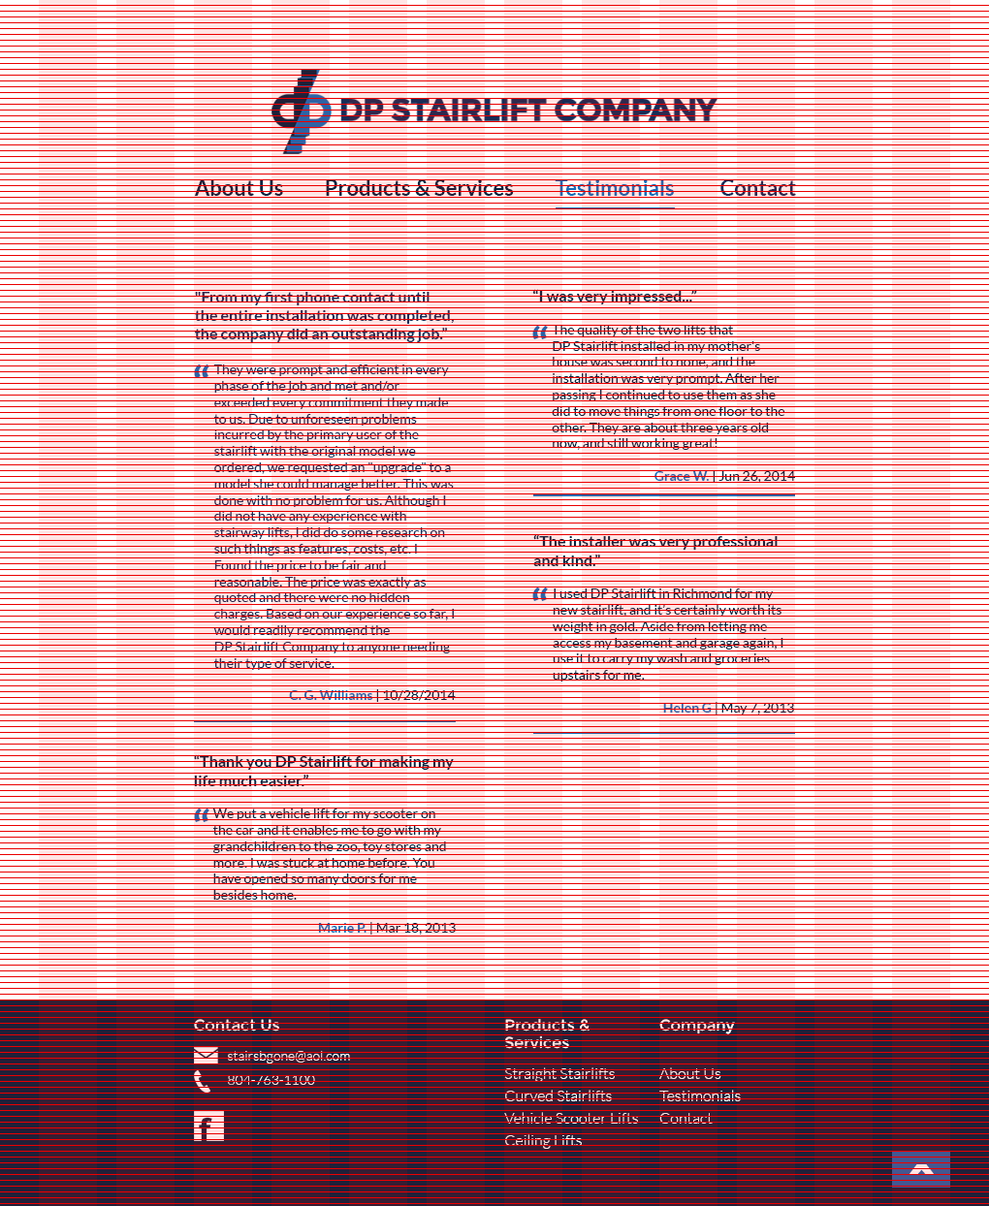
<style>
.page{position:relative;width:989px;height:1206px}
.page>*{position:absolute;margin:0}
.t1{font:21.3px "Lato-Bold";color:#07243f}
.t2{font:21.3px "Lato-Bold";color:#092540}
.t3{font:21.3px "Lato-Bold";color:#176db6}
.t4{font:21.3px "Lato-Bold";color:#192c56}
.t5{font:13.6px "Lato-Regular";color:#192c56}
.t6{font:15.5px "Lato-Bold";color:#192c56}
.t7{font:13.6px "Lato-Bold";color:#176db6}
.t8{font:13.6px "Lato-Regular";color:#07243f}
.t9{font:13.6px "Lato-Regular"}
.t10{font:15.5px "Lato-Bold"}
.t11{font:13.6px "Lato-Bold"}
.t12{font:47.5px "Lato-Bold";color:#176db6}
.t13{font:15.5px "Montserrat-Regular"}
.t14{font:15.5px/22.3px "Lato-Light"}
.t15{font:15.5px/19.4px "Montserrat-Regular"}
.t16{font:15.5px/17.4px "Montserrat-Regular"}
.t17{font:15.5px/15.5px "Lato-Light"}
.t18{font:15.5px/15.5px "Montserrat-Regular"}
.t19{font:15.5px/33px "Lato-Light"}
.t20{font:13.6px/5.8px "Lato-Light"}
.t21{font:13.6px/24.2px "Lato-Light"}
.t22{font:58.2px "Montserrat-Bold";color:#ffe5e5}
</style>
<div class="page">
<p class="t1" style="left:194px;top:179px;width:602px;height:17px"><span class="t2">About Us          </span>Products &amp; Services          <span class="t3">Testimonials</span><span class="t4">           Contact</span></p>
<p class="t5" style="left:194px;top:292px;width:262px;height:410px"><span class="t6">"From my first phone contact until the entire installation was completed, the company did an outstanding job.”<br><br></span>They were prompt and efficient in every phase of the job and met and/or <br>exceeded every commitment they made to us. Due to unforeseen problems incurred by the primary user of the <br>stairlift with the original model we<br>ordered, we requested an "upgrade" to a model she could manage better. This was done with no problem for us. Although I did not have any experience with <br>stairway lifts, I did do some research on such things as features, costs, etc. I Found the price to be fair and <br>reasonable. The price was exactly as quoted and there were no hidden charges. Based on our experience so far, I would readily recommend the <br>DP Stairlift Company to anyone needing their type of service. <br><br><span class="t7">C. G. Williams </span><span class="t8">| 10/28/2014</span></p>
<p class="t9" style="left:532px;top:289px;width:263px;height:194px"><span class="t10">“I was very impressed...” <br></span><br>The quality of the two lifts that <br>DP Stairlift installed in my mother's house was second to none, and the installation was very prompt. After her passing I continued to use them as she did to move things from one floor to the other. They are about three years old now, and still working great!<br><br><span class="t11">Grace W. </span>| Jun 26, 2014</p>
<p class="t12" style="left:532px;top:325px;width:16px;height:14px">“</p>
<p class="t12" style="left:194px;top:364px;width:15px;height:14px">“</p>
<p class="t9" style="left:533px;top:534px;width:261px;height:180px"><span class="t10">“The installer was very professional and kind.”<br></span><br>I used DP Stairlift in Richmond for my new stairlift, and it’s certainly worth its weight in gold. Aside from letting me access my basement and garage again, I use it to carry my wash and groceries upstairs for me.<br><br><span class="t11">Helen G </span>| May 7, 2013</p>
<p class="t12" style="left:532px;top:586px;width:16px;height:15px">“</p>
<p class="t9" style="left:194px;top:754px;width:262px;height:181px"><span class="t10">“Thank you DP Stairlift for making my life much easier.”<br></span><br>We put a vehicle lift for my scooter on the car and it enables me to go with my grandchildren to the zoo, toy stores and more. I was stuck at home before. You have opened so many doors for me besides home.<br><br><span class="t11">Marie P. </span>| Mar 18, 2013</p>
<p class="t12" style="left:194px;top:808px;width:15px;height:14px">“</p>
<p class="t13" style="left:194px;top:1019px;width:85px;height:12px">Contact Us</p>
<p class="t14" style="left:504px;top:1019px;width:134px;height:130px"><span class="t15">Products &amp; <br></span><span class="t16">Services<br><br></span><span class="t17">Straight Stairlifts<br></span>Curved Stairlifts<br>Vehicle Scooter Lifts<br>Ceiling Lifts</p>
<p class="t14" style="left:659px;top:1019px;width:82px;height:105px"><span class="t18">Company<br><br></span><span class="t19">About Us <br></span>Testimonials<br>Contact</p>
<p class="t20" style="left:228px;top:1051px;width:122px;height:34px">stairsbgone@aol.com<br><span class="t21">804-763-1100</span></p>
<p class="t22" style="left:908px;top:1164px;width:27px;height:11px">^</p>
</div>
